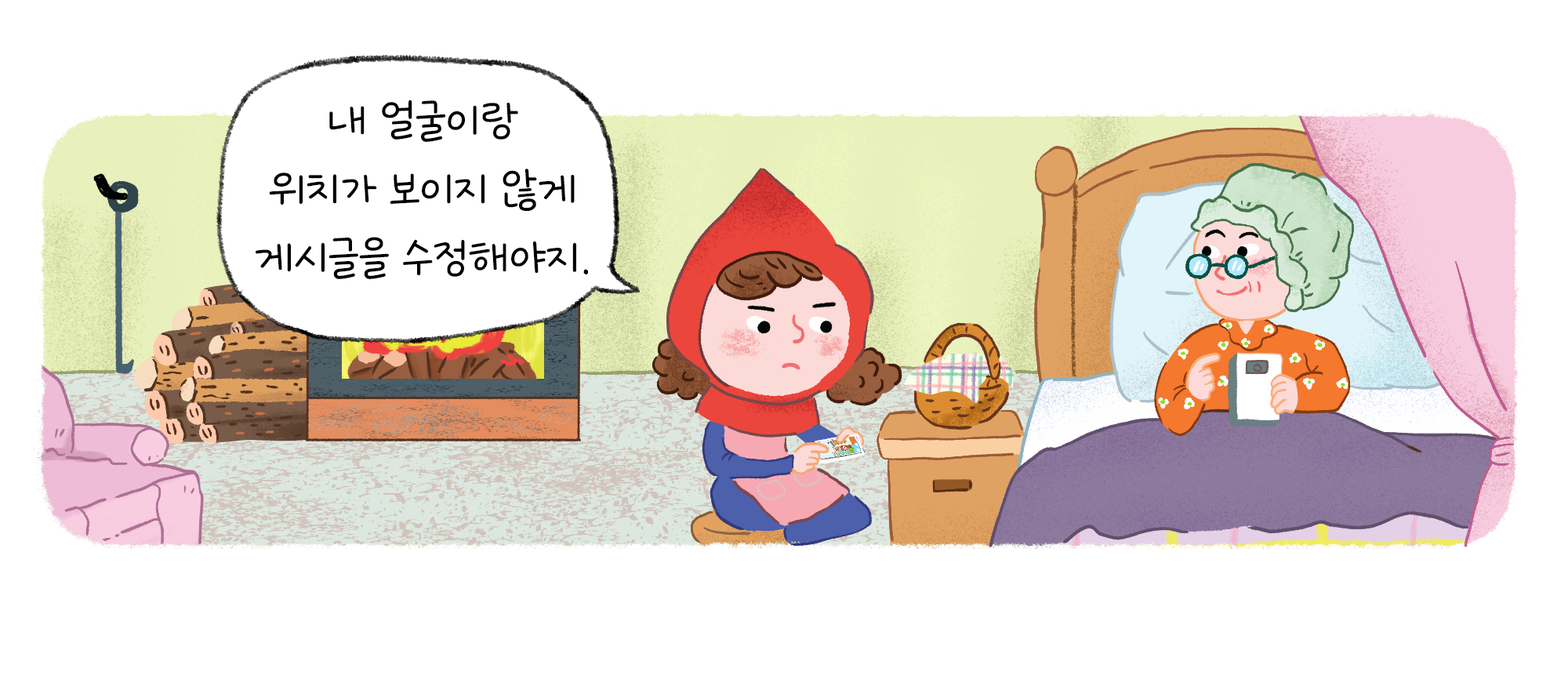
<style>
.page{position:relative;width:1568px;height:690px;background:#ffffff}
.page>*{position:absolute;margin:0}
.t1{font:58.8px/68.6px "GangwonEduSaeeumMedium";color:#000000}
</style>
<div class="page">
<p class="t1" style="left:255px;top:100px;width:333px;height:179px;text-align:center">내 얼굴이랑<br>위치가 보이지 않게<br>게시글을 수정해야지.</p>
</div>
